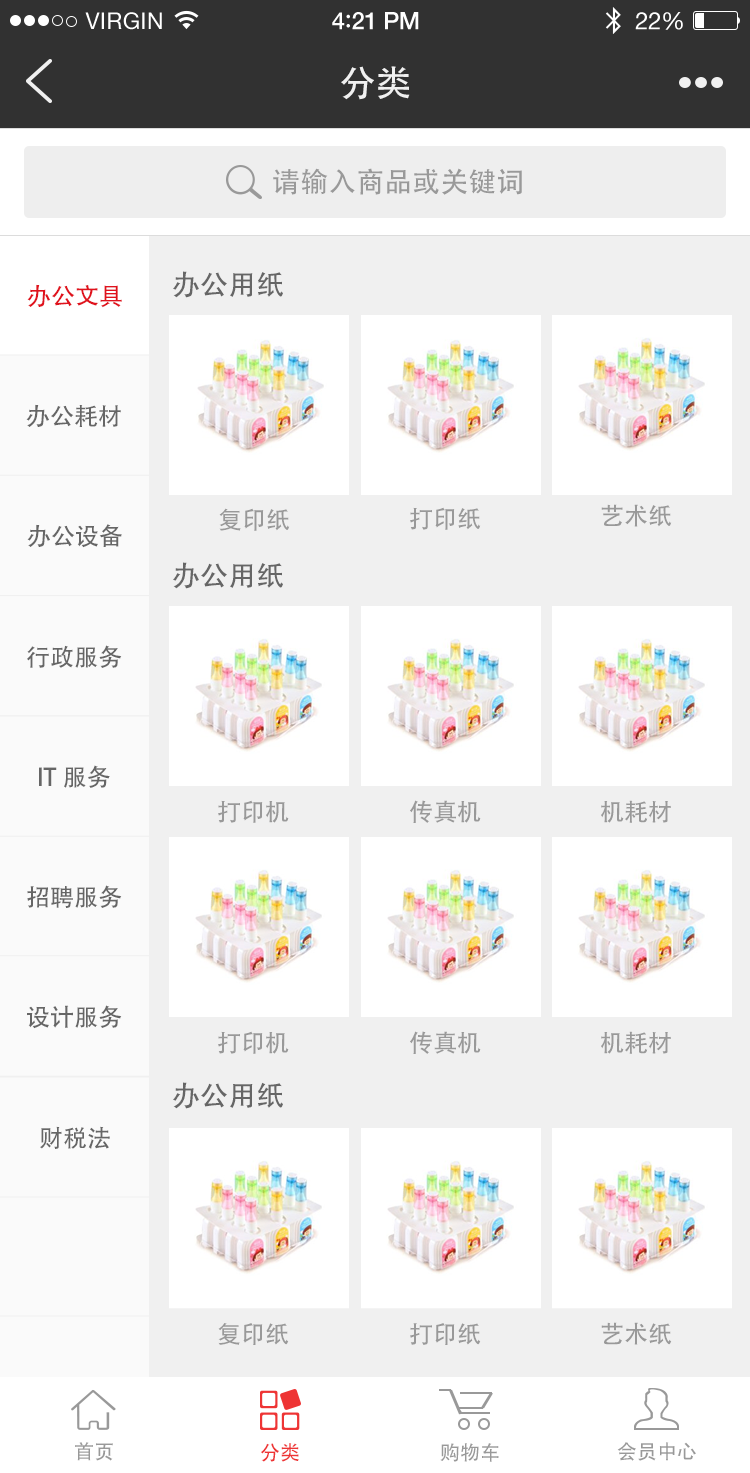
<style>
.page{position:relative;width:750px;height:1473px;background:#ffffff}
.page>*{position:absolute;margin:0}
.t1{font:36px "AdobeHeitiStd-Regular";color:#f0f0f0}
.t2{font:28px "AdobeHeitiStd-Regular";color:#999999}
.t3{font:28px "AdobeHeitiStd-Regular";color:#666666}
.t4{font:24px "AdobeHeitiStd-Regular";color:#666666}
.t5{font:24px "AdobeHeitiStd-Regular";color:#e0121d}
.t6{font:24px "AdobeHeitiStd-Regular";color:#999999}
.t7{font:20px "AdobeHeitiStd-Regular";color:#999999}
.t8{font:20px "AdobeHeitiStd-Regular";color:#ee3434}
</style>
<div class="page">
<p class="t1" style="left:341px;top:66px;width:69px;height:34px">分类</p>
<p class="t2" style="left:273px;top:168px;width:249px;height:27px">请输入商品或关键词</p>
<p class="t3" style="left:173px;top:271px;width:110px;height:27px"><span class="t4"> </span>办公用纸</p>
<p class="t5" style="left:27px;top:284px;width:95px;height:24px">办公文具</p>
<p class="t4" style="left:26px;top:404px;width:95px;height:23px">办公耗材</p>
<p class="t6" style="left:219px;top:508px;width:71px;height:23px">复印纸</p>
<p class="t6" style="left:410px;top:507px;width:71px;height:23px">打印纸</p>
<p class="t6" style="left:601px;top:504px;width:71px;height:23px">艺术纸</p>
<p class="t4" style="left:27px;top:524px;width:95px;height:24px">办公设备</p>
<p class="t3" style="left:173px;top:562px;width:110px;height:27px"><span class="t4"> </span>办公用纸</p>
<p class="t4" style="left:27px;top:645px;width:95px;height:23px">行政服务</p>
<p class="t4" style="left:39px;top:765px;width:71px;height:23px">IT服务</p>
<p class="t6" style="left:218px;top:800px;width:71px;height:23px">打印机</p>
<p class="t6" style="left:410px;top:800px;width:71px;height:23px">传真机</p>
<p class="t6" style="left:601px;top:800px;width:70px;height:23px">机耗材</p>
<p class="t4" style="left:27px;top:885px;width:95px;height:23px">招聘服务</p>
<p class="t4" style="left:27px;top:1005px;width:95px;height:24px">设计服务</p>
<p class="t6" style="left:218px;top:1031px;width:71px;height:23px">打印机</p>
<p class="t6" style="left:410px;top:1031px;width:71px;height:23px">传真机</p>
<p class="t6" style="left:601px;top:1031px;width:70px;height:23px">机耗材</p>
<p class="t3" style="left:173px;top:1082px;width:110px;height:27px"><span class="t4"> </span>办公用纸</p>
<p class="t4" style="left:40px;top:1126px;width:70px;height:23px">财税法</p>
<p class="t6" style="left:218px;top:1323px;width:71px;height:22px">复印纸</p>
<p class="t6" style="left:410px;top:1323px;width:71px;height:22px">打印纸</p>
<p class="t6" style="left:601px;top:1322px;width:71px;height:23px">艺术纸</p>
<p class="t7" style="left:75px;top:1442px;width:38px;height:19px">首页</p>
<p class="t8" style="left:261px;top:1443px;width:38px;height:19px">分类</p>
<p class="t7" style="left:440px;top:1443px;width:59px;height:19px">购物车</p>
<p class="t7" style="left:617px;top:1442px;width:79px;height:19px">会员中心</p>
</div>
